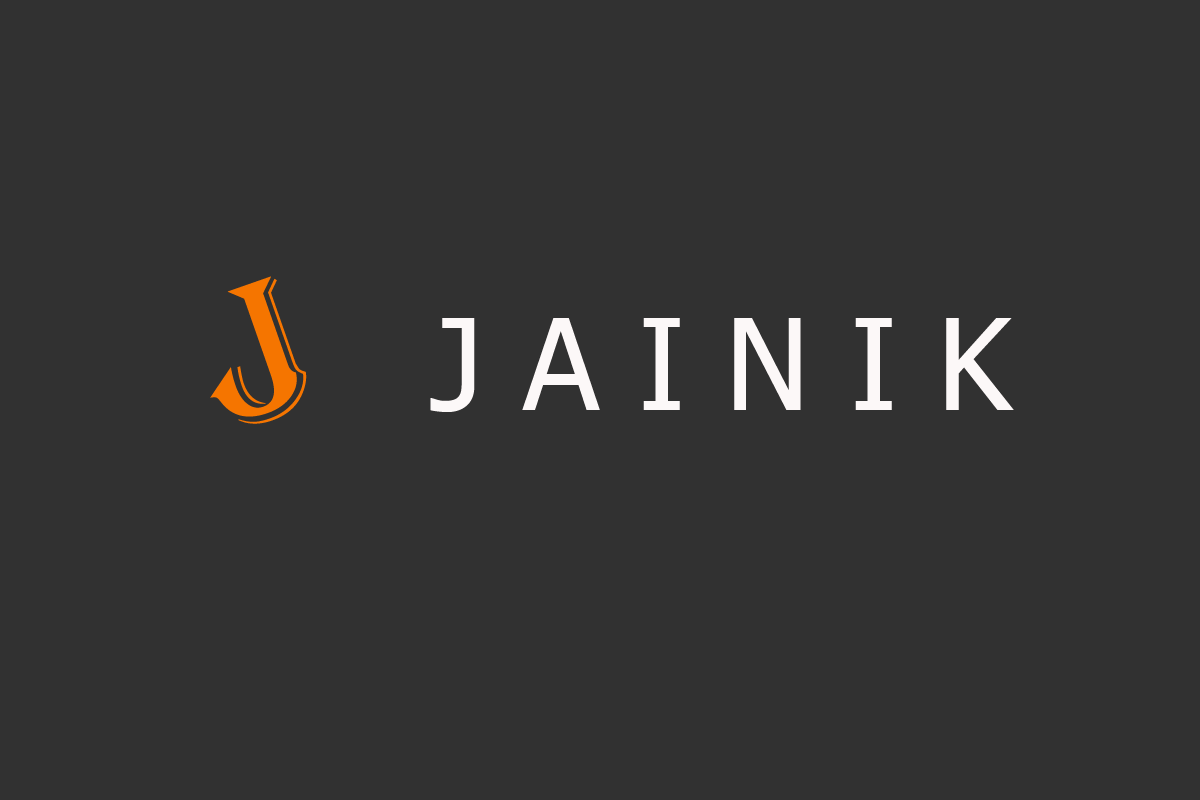
<style>
.page{position:relative;width:1200px;height:800px;background:#313131}
.page>*{position:absolute;margin:0}
.t1{font:199.7px "Algerian";color:#f57500}
.t2{font:127px "Tahoma";color:#fcf8f8}
</style>
<div class="page">
<p class="t1" style="left:210px;top:276px;width:97px;height:148px;rotate:-19deg">J</p>
<p class="t2" style="left:430px;top:318px;width:584px;height:94px">J A I N I K</p>
</div>
